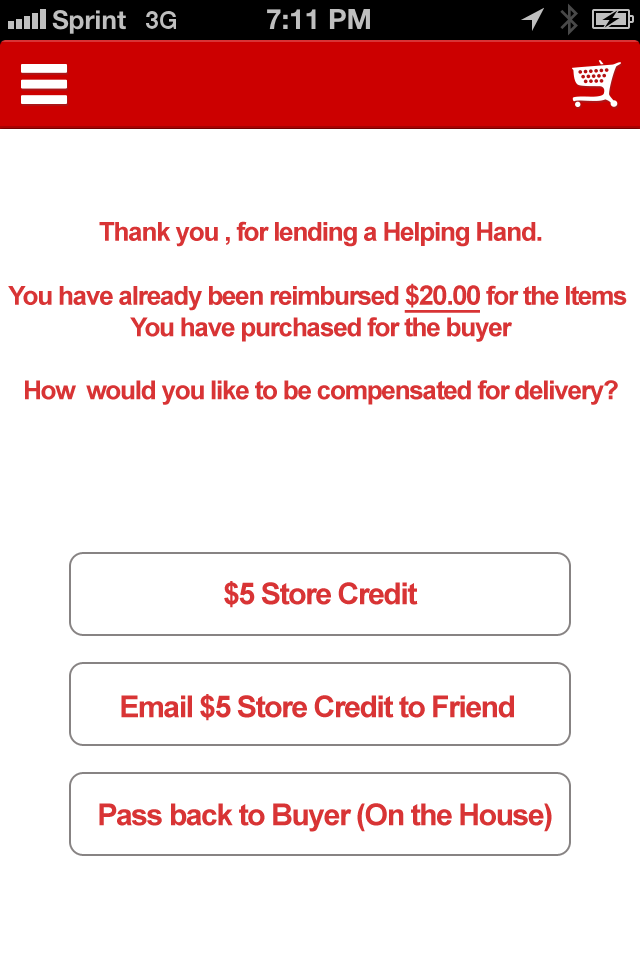
<style>
.page{position:relative;width:640px;height:960px;background:#ffffff}
.page>*{position:absolute;margin:0}
.t1{font:26.2px "Arial-BoldMT";letter-spacing:-0.05em;color:#d83435}
.t2{font:27.2px "Arial-BoldMT";letter-spacing:-0.05em;color:#d83435;text-decoration:underline}
.t3{font:30.2px "Arial-BoldMT";letter-spacing:-0.05em;color:#d83435}
</style>
<div class="page">
<p class="t1" style="left:8px;top:221px;width:619px;height:184px;text-align:center">Thank you , for lending a Helping Hand.<br><br>You have already been reimbursed <span class="t2">$20.00</span> for the Items <br>You have purchased for the buyer<br><br>How  would you like to be compensated for delivery?</p>
<p class="t3" style="left:224px;top:581px;width:194px;height:27px">$5 Store Credit</p>
<p class="t3" style="left:121px;top:694px;width:393px;height:27px">Email $5 Store Credit to Friend</p>
<p class="t3" style="left:99px;top:803px;width:453px;height:29px">Pass back to Buyer (On the House)</p>
</div>
